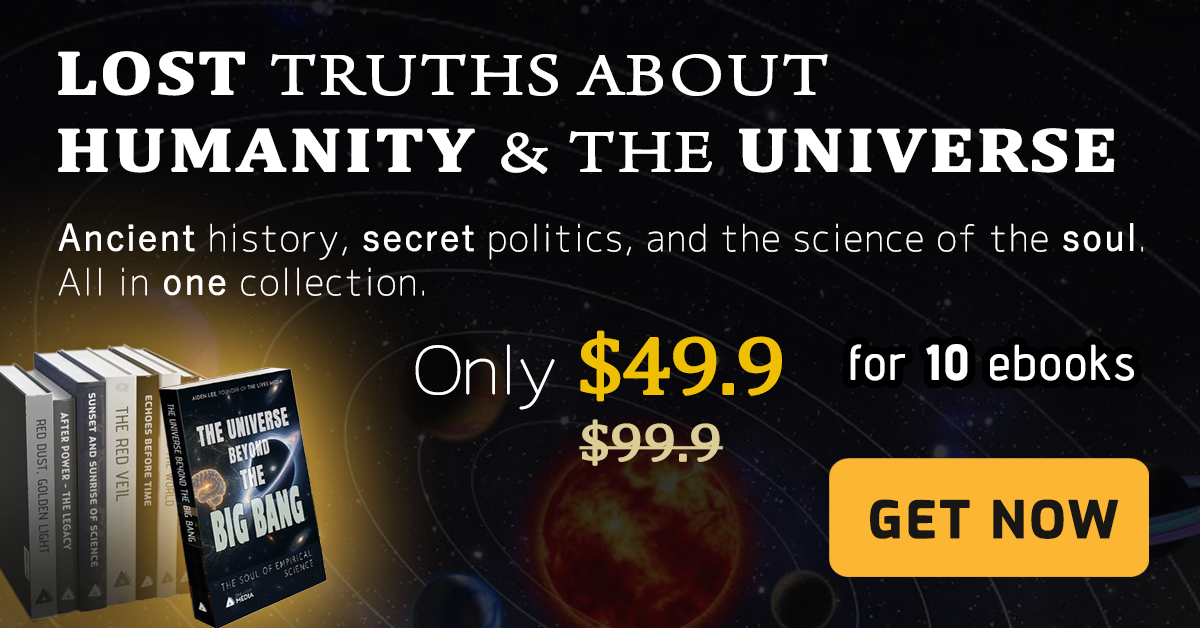
<style>
.page{position:relative;width:1200px;height:628px}
.page>*{position:absolute;margin:0}
.t1{font:61.6px/77px "ArnoPro-LightDisplay";letter-spacing:0.025em;color:#ffffff;font-weight:bold;scale:1.22 1}
.t2{font:61.6px/77px "Cambria-Bold";letter-spacing:0.025em;color:#ffffff;font-weight:bold;scale:1.22 1}
.t3{font:36px/44px "Chogokuboso-Gothic";letter-spacing:0.025em;color:#ffffff;font-weight:bold}
.t4{font:36px/44px "YuGothic-Regular";letter-spacing:0.025em;color:#ffffff;font-weight:bold}
.t5{font:82.8px "Cambria";letter-spacing:-0.05em;color:#efbf04;font-weight:bold;scale:1.11 1}
.t6{font:64.8px "Chogokuboso-Gothic";letter-spacing:-0.05em;color:#ffffff;font-weight:bold;scale:1.11 1}
.t7{font:48px "AdventPro-Regular";letter-spacing:0.05em;color:#ffffff;font-weight:bold}
.t8{font:48px "AdventPro-Bold";letter-spacing:0.05em;color:#ffffff;font-weight:bold}
.t9{font:54px "Cambria";letter-spacing:-0.025em;color:#dbcd95;font-weight:bold;scale:1.11 1}
.t10{font:50.3px "Exo-Bold";letter-spacing:0.05em;color:#191616;font-weight:bold}
</style>
<div class="page">
<p class="t1" style="left:58px;top:51px;width:1057px;height:123px"><span class="t2">LOST </span>TRUTHS ABOUT <br><span class="t2">HUMANITY </span>&amp; THE <span class="t2">UNIVERSE</span></p>
<p class="t3" style="left:58px;top:223px;width:1085px;height:73px"><span class="t4">Ancient</span> history, <span class="t4">secret</span> politics, and the science of the <span class="t4">soul</span>. All in <span class="t4">one</span> collection.</p>
<p class="t5" style="left:415px;top:330px;width:367px;height:80px"><span class="t6">Only </span>$49.9</p>
<p class="t7" style="left:850px;top:344px;width:284px;height:37px">for <span class="t8">10</span> ebooks</p>
<p class="t9" style="left:579px;top:419px;width:144px;height:47px">$99.9</p>
<p class="t10" style="left:870px;top:499px;width:249px;height:40px">GET NOW</p>
</div>
